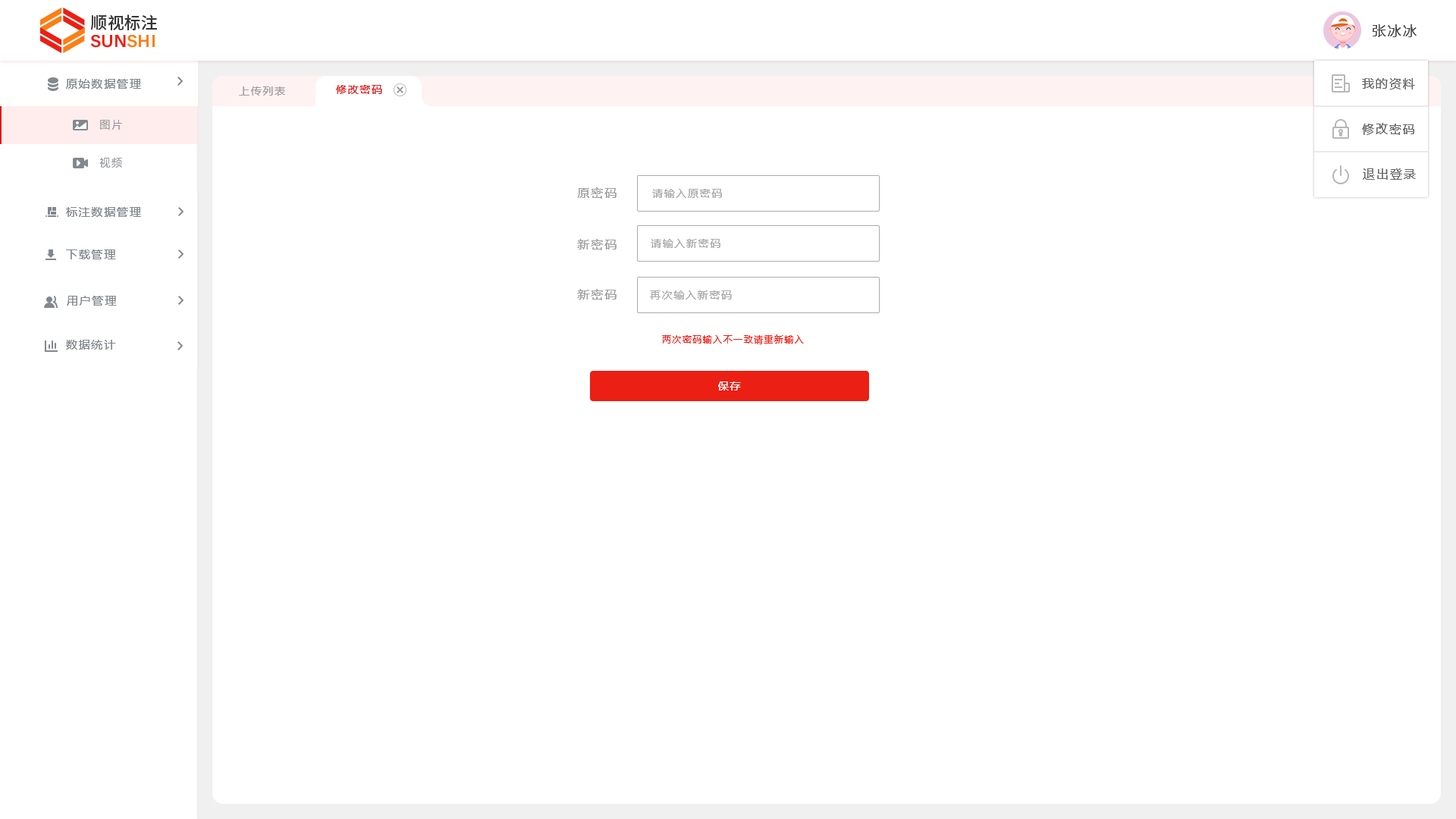
<style>
.page{position:relative;width:1456px;height:819px;background:#ffffff}
.page>*{position:absolute;margin:0}
.t1{font:13.6px "MicrosoftYaHei";letter-spacing:0.12em;color:#464646}
.t2{font:11.4px "MicrosoftYaHei";letter-spacing:0.12em;color:#83888f}
.t3{font:10.6px "MicrosoftYaHei";letter-spacing:0.12em;color:#a0a0a0}
.t4{font:10.6px "MicrosoftYaHei";letter-spacing:0.12em;color:#df1919}
.t5{font:12.1px "MicrosoftYaHei";letter-spacing:0.12em;color:#666666}
.t6{font:10.6px "MicrosoftYaHeiLight";letter-spacing:0.12em;color:#8d9298}
.t7{font:12.1px "MicrosoftYaHei";letter-spacing:0.12em;color:#9e9e9e}
.t8{font:10.6px "MicrosoftYaHei";letter-spacing:0.12em;color:#aaaaaa}
.t9{font:9.1px "MicrosoftYaHei";letter-spacing:0.12em;color:#ec1f14}
.t10{font:10.6px "MicrosoftYaHei";letter-spacing:0.12em;color:#ffffff}
</style>
<div class="page">
<p class="t1" style="left:1373px;top:24px;width:44px;height:13px">张冰冰</p>
<p class="t2" style="left:66px;top:79px;width:75px;height:10px">原始数据管理</p>
<p class="t3" style="left:239px;top:86px;width:46px;height:10px">上传列表</p>
<p class="t4" style="left:336px;top:85px;width:46px;height:9px">修改密码</p>
<p class="t5" style="left:1362px;top:78px;width:53px;height:11px">我的资料</p>
<p class="t6" style="left:100px;top:120px;width:22px;height:10px">图片</p>
<p class="t5" style="left:1362px;top:123px;width:52px;height:12px">修改密码</p>
<p class="t6" style="left:99px;top:158px;width:23px;height:10px">视频</p>
<p class="t5" style="left:1363px;top:168px;width:53px;height:12px">退出登录</p>
<p class="t7" style="left:577px;top:187px;width:40px;height:12px">原密码</p>
<p class="t8" style="left:652px;top:189px;width:70px;height:9px">请输入原密码</p>
<p class="t2" style="left:66px;top:207px;width:75px;height:10px">标注数据管理</p>
<p class="t7" style="left:577px;top:239px;width:40px;height:11px">新密码</p>
<p class="t8" style="left:651px;top:239px;width:69px;height:9px">请输入新密码</p>
<p class="t2" style="left:66px;top:249px;width:50px;height:10px">下载管理</p>
<p class="t7" style="left:577px;top:289px;width:40px;height:11px">新密码</p>
<p class="t8" style="left:650px;top:290px;width:82px;height:10px">再次输入新密码</p>
<p class="t2" style="left:67px;top:296px;width:50px;height:10px">用户管理</p>
<p class="t2" style="left:66px;top:340px;width:50px;height:10px">数据统计</p>
<p class="t9" style="left:662px;top:334px;width:142px;height:10px">两次密码输入不一致请重新输入</p>
<p class="t10" style="left:718px;top:381px;width:23px;height:10px">保存</p>
</div>
